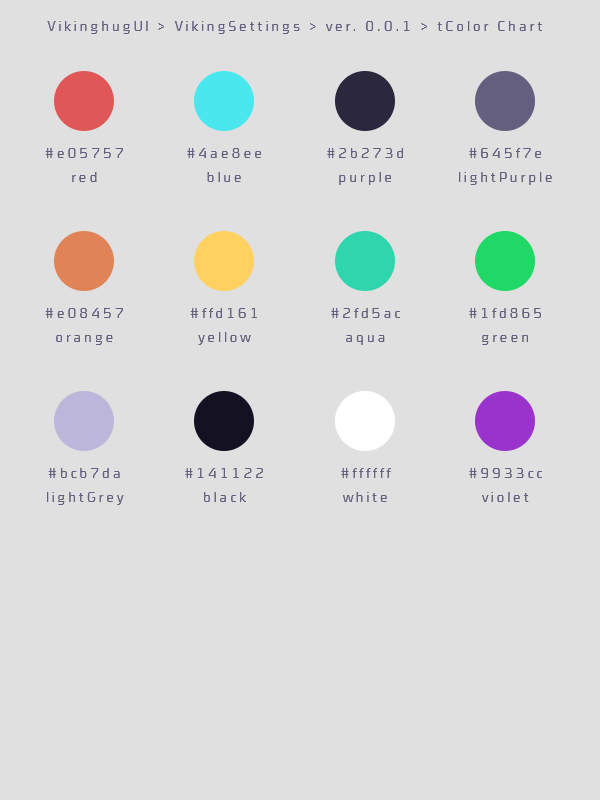
<style>
.page{position:relative;width:600px;height:800px;background:#e0e0e0}
.page>*{position:absolute;margin:0}
.t1{font:14px "CubeOffc-CondLight";letter-spacing:0.2em;color:#645f7e}
.t2{font:14px/24px "CubeOffc-CondLight";letter-spacing:0.2em;color:#64617d}
</style>
<div class="page">
<p class="t1" style="left:47px;top:21px;width:495px;height:13px">VikinghugUI &gt; VikingSettings &gt; ver. 0.0.1 &gt; tColor Chart</p>
<p class="t2" style="left:45px;top:148px;width:78px;height:34px;text-align:center">#e05757<br>red</p>
<p class="t2" style="left:187px;top:148px;width:74px;height:34px;text-align:center">#4ae8ee<br>blue</p>
<p class="t2" style="left:327px;top:148px;width:76px;height:37px;text-align:center">#2b273d<br>purple</p>
<p class="t2" style="left:459px;top:148px;width:93px;height:37px;text-align:center">#645f7e<br>lightPurple</p>
<p class="t2" style="left:45px;top:308px;width:78px;height:37px;text-align:center">#e08457<br>orange</p>
<p class="t2" style="left:190px;top:308px;width:67px;height:37px;text-align:center">#ffd161<br>yellow</p>
<p class="t2" style="left:331px;top:308px;width:69px;height:37px;text-align:center">#2fd5ac<br>aqua</p>
<p class="t2" style="left:469px;top:308px;width:72px;height:37px;text-align:center">#1fd865<br>green</p>
<p class="t2" style="left:47px;top:468px;width:77px;height:37px;text-align:center">#bcb7da<br>lightGrey</p>
<p class="t2" style="left:185px;top:468px;width:78px;height:34px;text-align:center">#141122<br>black</p>
<p class="t2" style="left:341px;top:468px;width:50px;height:34px;text-align:center">#ffffff<br>white</p>
<p class="t2" style="left:469px;top:468px;width:73px;height:34px;text-align:center">#9933cc<br>violet</p>
</div>
